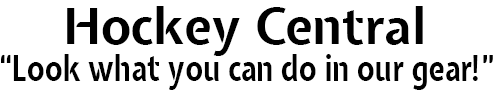
<style>
.page{position:relative;width:500px;height:90px;background:#ffffff}
.page>*{position:absolute;margin:0}
.t1{font:12px "ExpletusSans-Bold";color:#000000}
.t2{font:35.6px "ExpletusSans-Bold";color:#000000;scale:0.82 1}
</style>
<div class="page">
<p class="t1" style="left:67px;top:6px;width:356px;height:50px">Hockey Central</p>
<p class="t2" style="left:1px;top:54px;width:492px;height:36px">“Look what you can do in our gear!”</p>
</div>
